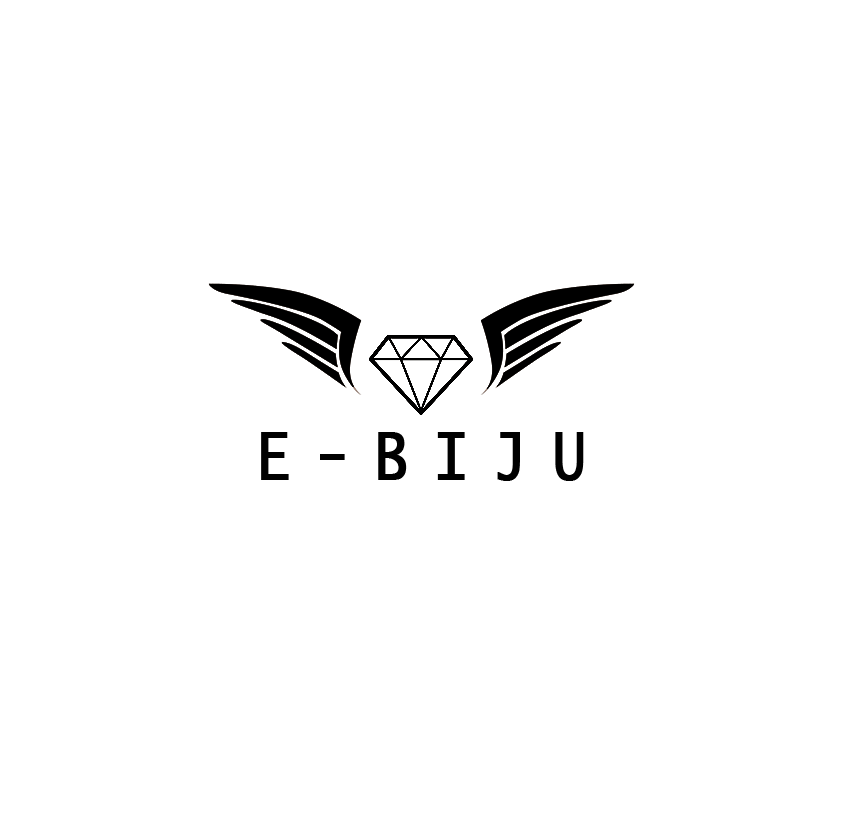
<style>
.page{position:relative;width:842px;height:831px;background:#ffffff}
.page>*{position:absolute;margin:0}
.t1{font:74.9px "LucidaConsole";letter-spacing:0.39em;color:#000000;font-weight:bold;scale:0.77 1}
</style>
<div class="page">
<p class="t1" style="left:261px;top:432px;width:323px;height:49px">E-BIJU</p>
</div>
